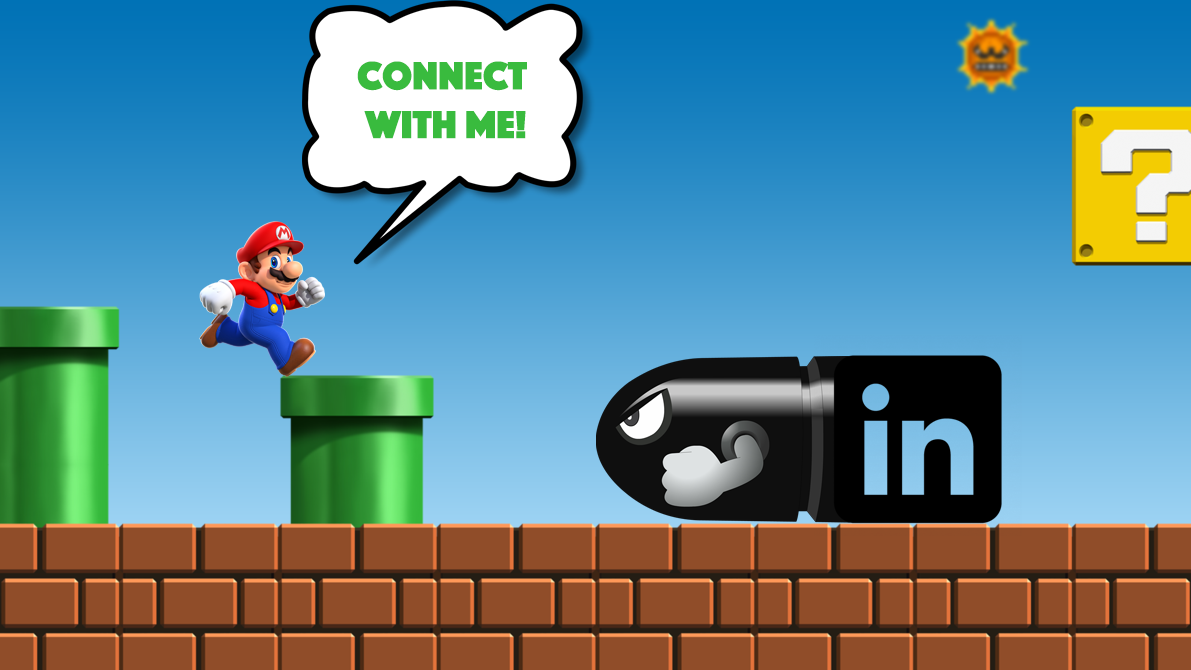
<style>
.page{position:relative;width:1191px;height:670px}
.page>*{position:absolute;margin:0}
.t1{font:40.7px "Phosphate-Solid";color:#39bb3e}
</style>
<div class="page">
<p class="t1" style="left:357px;top:61px;width:170px;height:78px;text-align:center">Connect <br>with me!</p>
</div>
